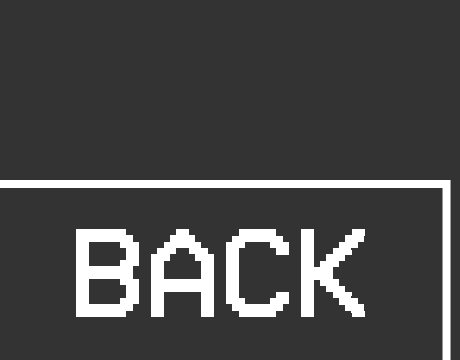
<style>
.page{position:relative;width:460px;height:360px;background:#333333}
.page>*{position:absolute;margin:0}
.t1{font:128px "VCROSDMono";color:#ffffff}
</style>
<div class="page">
<p class="t1" style="left:76px;top:229px;width:289px;height:88px">BACK</p>
</div>
